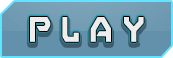
<style>
.page{position:relative;width:173px;height:58px;background:#6391ab}
.page>*{position:absolute;margin:0}
.t1{font:33.5px "VoyagerGrotesqueBold";letter-spacing:0.3em;color:#ffffff}
</style>
<div class="page">
<p class="t1" style="left:30px;top:17px;width:114px;height:25px">PLAY</p>
</div>
